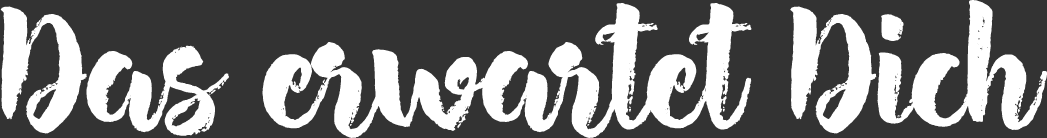
<style>
.page{position:relative;width:1047px;height:138px;background:#333333}
.page>*{position:absolute;margin:0}
.t1{font:160px "Hensa-Regular";letter-spacing:-0.02em;color:#ffffff}
.t2{font:160px "Hensa-Regular";letter-spacing:-0.02em;color:#ffffff;text-transform:uppercase}
</style>
<div class="page">
<p class="t1" style="left:0px;top:0px;width:1047px;height:138px"><span class="t2">D</span>as erwartet Dich</p>
</div>
